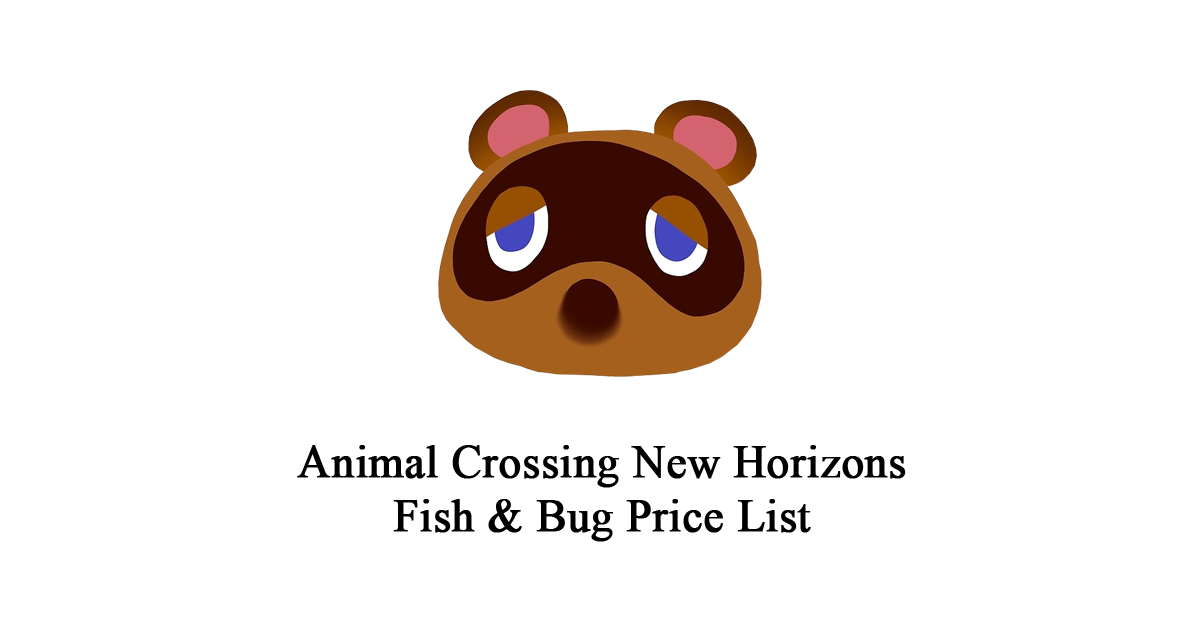
<style>
.page{position:relative;width:1200px;height:630px;background:#ffffff}
.page>*{position:absolute;margin:0}
.t1{font:44.7px "TimesNewRomanPSMT";color:#000000;font-weight:bold}
</style>
<div class="page">
<p class="t1" style="left:297px;top:445px;width:609px;height:97px;text-align:center">Animal Crossing New Horizons<br>Fish &amp; Bug Price List</p>
</div>
